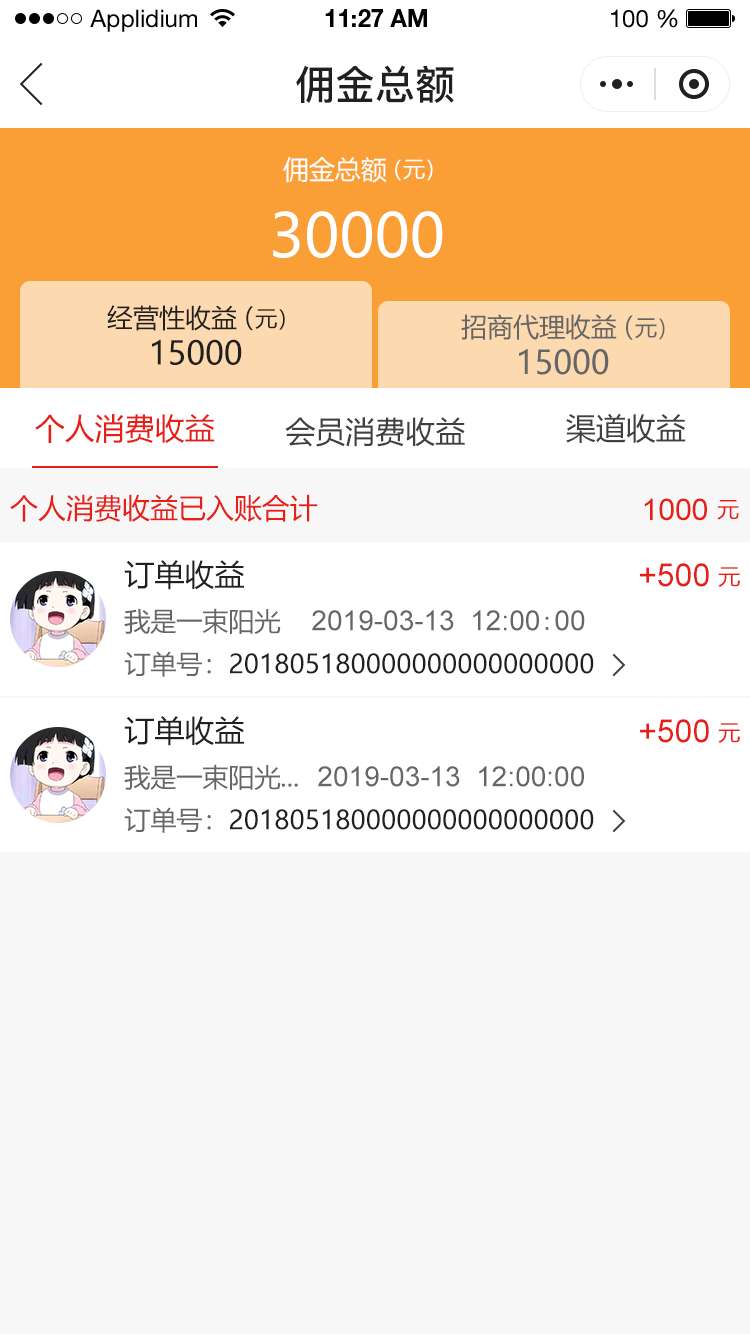
<style>
.page{position:relative;width:750px;height:1334px;background:#f7f7f7}
.page>*{position:absolute;margin:0}
.t1{font:24px "HelveticaNeueLTStd-Roman";color:#000000}
.t2{font:24px "HelveticaNeueLTStd-Bd";color:#000000}
.t3{font:40px "PingFang-SC-Bold";color:#202020;text-transform:uppercase}
.t4{font:26px "MicrosoftYaHei";color:#ffffff;text-transform:uppercase}
.t5{font:22px "MicrosoftYaHei";color:#ffffff;text-transform:uppercase}
.t6{font:60px "MicrosoftYaHei";color:#ffffff;text-transform:uppercase}
.t7{font:26px "MicrosoftYaHei";color:#202020;text-transform:uppercase}
.t8{font:22px "MicrosoftYaHei";color:#202020;text-transform:uppercase}
.t9{font:26.2px "MicrosoftYaHei";color:#666666;text-transform:uppercase}
.t10{font:22.2px "MicrosoftYaHei";color:#666666;text-transform:uppercase}
.t11{font:32px "MicrosoftYaHei";color:#202020;text-transform:uppercase}
.t12{font:32.2px "MicrosoftYaHei";color:#666666;text-transform:uppercase}
.t13{font:30px "MicrosoftYaHei";color:#e61f18;text-transform:uppercase}
.t14{font:30px "MicrosoftYaHei";color:#404040;text-transform:uppercase}
.t15{font:28px "MicrosoftYaHei";color:#e61f18;text-transform:uppercase}
.t16{font:30px "ArialMT";color:#e61f18;text-transform:uppercase}
.t17{font:22px "MicrosoftYaHei";color:#e61f18;text-transform:uppercase}
.t18{font:30px "MicrosoftYaHei";color:#202020;text-transform:uppercase}
.t19{font:32px "ArialMT";color:#e61f18;text-transform:uppercase}
.t20{font:26px "MicrosoftYaHei";color:#666666;text-transform:uppercase}
.t21{font:28px "ArialMT";color:#666666;text-transform:uppercase}
.t22{font:28px "SimSun";color:#666666;text-transform:uppercase}
</style>
<div class="page">
<p class="t1" style="left:90px;top:9px;width:107px;height:23px">Applidium</p>
<p class="t2" style="left:325px;top:9px;width:102px;height:18px">11:27 AM</p>
<p class="t1" style="left:611px;top:9px;width:67px;height:19px">100 %</p>
<p class="t3" style="left:296px;top:65px;width:158px;height:38px">佣金总额</p>
<p class="t4" style="left:283px;top:157px;width:104px;height:26px">佣金总额</p>
<p class="t5" style="left:395px;top:159px;width:38px;height:22px">（元）</p>
<p class="t6" style="left:273px;top:211px;width:170px;height:47px">30000</p>
<p class="t7" style="left:107px;top:305px;width:130px;height:26px">经营性收益</p>
<p class="t8" style="left:246px;top:306px;width:39px;height:25px"><span class="t7">（</span>元）</p>
<p class="t9" style="left:461px;top:314px;width:156px;height:26px">招商代理收益</p>
<p class="t10" style="left:626px;top:315px;width:39px;height:25px"><span class="t9">（</span>元）</p>
<p class="t11" style="left:152px;top:339px;width:90px;height:26px">15000</p>
<p class="t12" style="left:519px;top:349px;width:90px;height:26px">15000</p>
<p class="t13" style="left:35px;top:414px;width:180px;height:29px">个人消费收益</p>
<p class="t14" style="left:566px;top:413px;width:120px;height:30px">渠道收益</p>
<p class="t14" style="left:285px;top:417px;width:180px;height:30px">会员消费收益</p>
<p class="t15" style="left:10px;top:494px;width:308px;height:28px">个人消费收益已入账合计</p>
<p class="t16" style="left:644px;top:498px;width:63px;height:23px">1000</p>
<p class="t17" style="left:717px;top:500px;width:22px;height:20px">元</p>
<p class="t18" style="left:124px;top:560px;width:120px;height:30px">订单收益</p>
<p class="t19" style="left:640px;top:563px;width:69px;height:24px">+500</p>
<p class="t17" style="left:718px;top:567px;width:22px;height:20px">元</p>
<p class="t20" style="left:124px;top:608px;width:157px;height:26px">我是一束阳光</p>
<p class="t21" style="left:312px;top:610px;width:273px;height:21px">2019-03-13  12:00<span class="t22">:</span>00</p>
<p class="t7" style="left:124px;top:651px;width:470px;height:26px"><span class="t20">订单号：</span>201805180000000000000000</p>
<p class="t18" style="left:124px;top:716px;width:120px;height:30px">订单收益</p>
<p class="t19" style="left:640px;top:719px;width:69px;height:24px">+500</p>
<p class="t17" style="left:718px;top:723px;width:22px;height:20px">元</p>
<p class="t20" style="left:124px;top:764px;width:174px;height:26px">我是一束阳光...</p>
<p class="t21" style="left:318px;top:766px;width:266px;height:21px">2019-03-13  12:00:00</p>
<p class="t7" style="left:124px;top:807px;width:470px;height:26px"><span class="t20">订单号：</span>201805180000000000000000</p>
</div>
